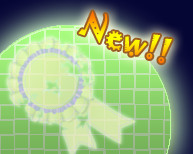
<style>
.page{position:relative;width:193px;height:154px}
.page>*{position:absolute;margin:0}
.t1{font:30px "Jokerman-Regular";font-weight:bold}
</style>
<div class="page">
<p class="t1" style="left:78px;top:11px;width:94px;height:53px;rotate:19deg">New!!</p>
</div>
